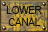
<style>
.page{position:relative;width:48px;height:32px}
.page>*{position:absolute;margin:0}
.t1{font:11px/12px "ArialMT";color:#131312;scale:0.87 1}
</style>
<div class="page">
<p class="t1" style="left:6px;top:6px;width:36px;height:20px;text-align:center">LOWER<br>CANAL</p>
</div>
